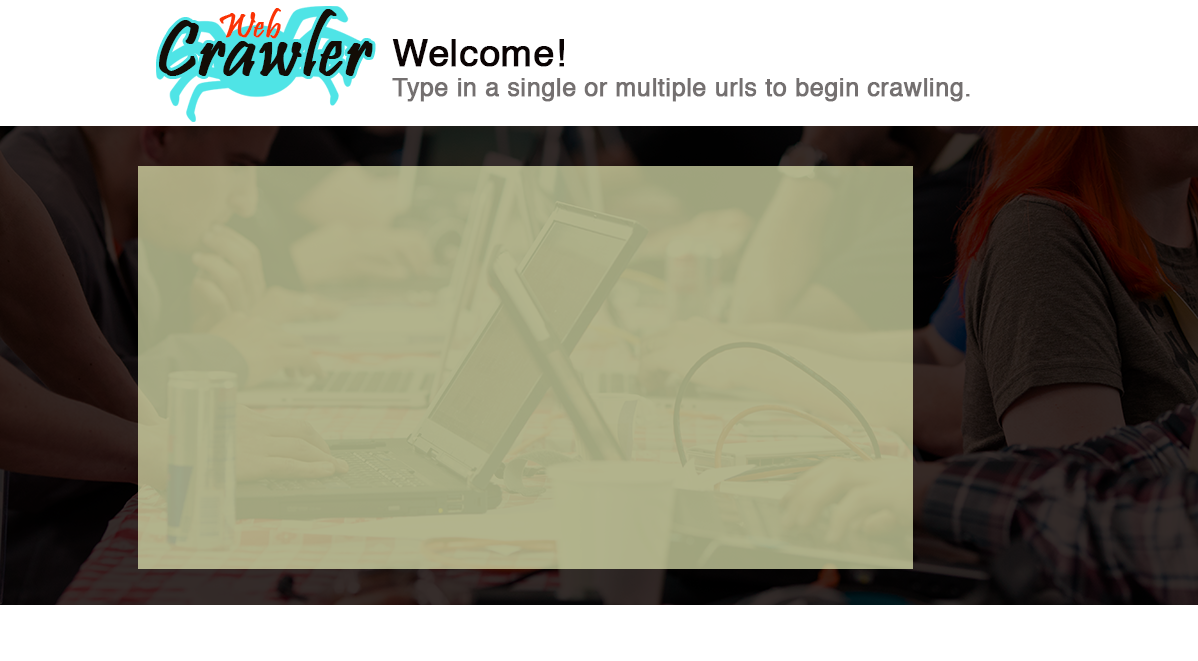
<style>
.page{position:relative;width:1198px;height:661px;background:#ffffff}
.page>*{position:absolute;margin:0}
.t1{font:25px "Helvetica";color:#747070;font-weight:bold}
.t2{font:37.5px "Helvetica";color:#0a0303;font-weight:bold}
</style>
<div class="page">
<p class="t1" style="left:392px;top:39px;width:578px;height:63px"><span class="t2">Welcome! <br></span>Type in a single or multiple urls to begin crawling.</p>
</div>
